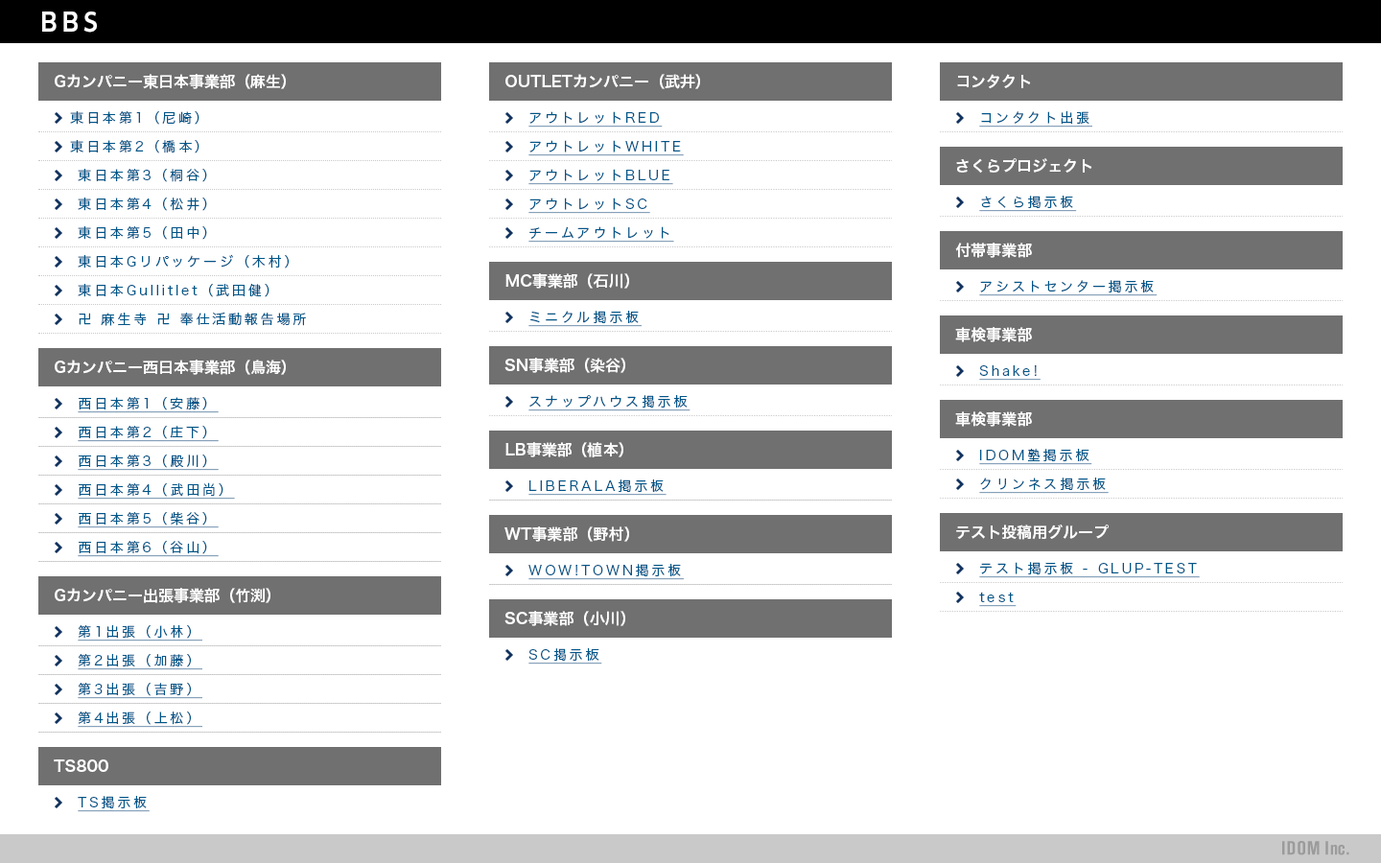
<style>
.page{position:relative;width:1381px;height:863px;background:#ffffff}
.page>*{position:absolute;margin:0}
.t1{font:24.9px "UDShinGoPro-DeBold";letter-spacing:0.2em;color:#fefefe}
.t2{font:15.3px "HiraKakuPro-W6";color:#ffffff}
.t3{font:13.4px "HiraKakuPro-W3";letter-spacing:0.2em;color:#005588}
.t4{font:13.4px "HiraKakuPro-W3";letter-spacing:0.2em;color:#005588;text-decoration:underline}
.t5{font:19.2px "AkzidenzGroteskBE-BoldCn";letter-spacing:0.03em;color:#9b9b9b}
</style>
<div class="page">
<p class="t1" style="left:42px;top:12px;width:55px;height:21px">BBS</p>
<p class="t2" style="left:55px;top:74px;width:231px;height:15px">Gカンパニー東日本事業部（麻生）</p>
<p class="t2" style="left:506px;top:74px;width:194px;height:15px">OUTLETカンパニー（武井）</p>
<p class="t2" style="left:957px;top:74px;width:74px;height:15px">コンタクト</p>
<p class="t3" style="left:70px;top:111px;width:130px;height:14px">東日本第1（尼崎）</p>
<p class="t4" style="left:529px;top:111px;width:134px;height:17px">アウトレットRED</p>
<p class="t4" style="left:979px;top:111px;width:114px;height:17px">コンタクト出張</p>
<p class="t3" style="left:70px;top:140px;width:130px;height:13px">東日本第2（橋本）</p>
<p class="t4" style="left:529px;top:140px;width:155px;height:16px">アウトレットWHITE</p>
<p class="t2" style="left:956px;top:158px;width:137px;height:16px">さくらプロジェクト</p>
<p class="t3" style="left:78px;top:169px;width:129px;height:13px">東日本第3（桐谷）</p>
<p class="t4" style="left:529px;top:169px;width:144px;height:16px">アウトレットBLUE</p>
<p class="t3" style="left:78px;top:198px;width:129px;height:13px">東日本第4（松井）</p>
<p class="t4" style="left:529px;top:198px;width:121px;height:16px">アウトレットSC</p>
<p class="t4" style="left:979px;top:196px;width:98px;height:16px">さくら掲示板</p>
<p class="t3" style="left:78px;top:226px;width:129px;height:14px">東日本第5（田中）</p>
<p class="t4" style="left:529px;top:226px;width:145px;height:17px">チームアウトレット</p>
<p class="t2" style="left:955px;top:243px;width:77px;height:15px">付帯事業部</p>
<p class="t3" style="left:78px;top:254px;width:211px;height:15px">東日本Gリパッケージ（木村）</p>
<p class="t2" style="left:506px;top:273px;width:123px;height:16px">MC事業部（石川）</p>
<p class="t4" style="left:979px;top:280px;width:179px;height:16px">アシストセンター掲示板</p>
<p class="t3" style="left:78px;top:283px;width:192px;height:14px">東日本Gullitlet（武田健）</p>
<p class="t3" style="left:79px;top:312px;width:227px;height:14px">卍 麻生寺 卍 奉仕活動報告場所</p>
<p class="t4" style="left:529px;top:311px;width:113px;height:16px">ミニクル掲示板</p>
<p class="t2" style="left:955px;top:327px;width:77px;height:15px">車検事業部</p>
<p class="t2" style="left:55px;top:360px;width:231px;height:15px">Gカンパニー西日本事業部（鳥海）</p>
<p class="t2" style="left:505px;top:358px;width:120px;height:15px">SN事業部（染谷）</p>
<p class="t4" style="left:979px;top:365px;width:62px;height:16px">Shake!</p>
<p class="t4" style="left:78px;top:397px;width:141px;height:16px">西日本第1（安藤）</p>
<p class="t4" style="left:529px;top:395px;width:162px;height:17px">スナップハウス掲示板</p>
<p class="t2" style="left:955px;top:412px;width:77px;height:15px">車検事業部</p>
<p class="t4" style="left:78px;top:426px;width:141px;height:16px">西日本第2（庄下）</p>
<p class="t2" style="left:506px;top:442px;width:117px;height:16px">LB事業部（植本）</p>
<p class="t4" style="left:979px;top:449px;width:114px;height:16px">IDOM塾掲示板</p>
<p class="t4" style="left:78px;top:455px;width:141px;height:16px">西日本第3（殿川）</p>
<p class="t4" style="left:78px;top:482px;width:157px;height:18px">西日本第4（武田尚）</p>
<p class="t4" style="left:529px;top:480px;width:138px;height:16px">LIBERALA掲示板</p>
<p class="t4" style="left:979px;top:478px;width:130px;height:16px">クリンネス掲示板</p>
<p class="t4" style="left:78px;top:512px;width:141px;height:17px">西日本第5（柴谷）</p>
<p class="t2" style="left:505px;top:527px;width:124px;height:15px">WT事業部（野村）</p>
<p class="t2" style="left:956px;top:525px;width:153px;height:15px">テスト投稿用グループ</p>
<p class="t4" style="left:78px;top:541px;width:141px;height:16px">西日本第6（谷山）</p>
<p class="t4" style="left:529px;top:564px;width:155px;height:16px">WOW!TOWN掲示板</p>
<p class="t4" style="left:979px;top:562px;width:221px;height:16px">テスト掲示板 - GLUP-TEST</p>
<p class="t2" style="left:55px;top:588px;width:215px;height:15px">Gカンパニー出張事業部（竹渕）</p>
<p class="t4" style="left:979px;top:592px;width:38px;height:15px">test</p>
<p class="t2" style="left:505px;top:611px;width:120px;height:15px">SC事業部（小川）</p>
<p class="t4" style="left:78px;top:625px;width:124px;height:17px">第1出張（小林）</p>
<p class="t4" style="left:529px;top:648px;width:73px;height:17px">SC掲示板</p>
<p class="t4" style="left:78px;top:654px;width:124px;height:16px">第2出張（加藤）</p>
<p class="t4" style="left:78px;top:683px;width:124px;height:16px">第3出張（吉野）</p>
<p class="t4" style="left:78px;top:712px;width:124px;height:16px">第4出張（上松）</p>
<p class="t2" style="left:54px;top:760px;width:54px;height:12px">TS800</p>
<p class="t4" style="left:78px;top:796px;width:72px;height:16px">TS掲示板</p>
<p class="t5" style="left:1282px;top:841px;width:68px;height:15px">IDOMInc.</p>
</div>
